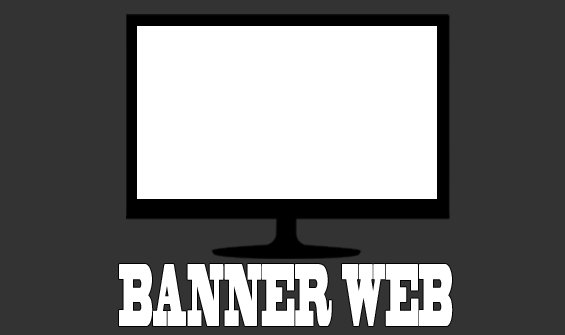
<style>
.page{position:relative;width:565px;height:335px;background:#333333}
.page>*{position:absolute;margin:0}
.t1{font:83.3px "BlackoakStd";color:#ffffff;scale:0.22 1}
</style>
<div class="page">
<p class="t1" style="left:119px;top:264px;width:334px;height:62px">BANNER WEB</p>
</div>
